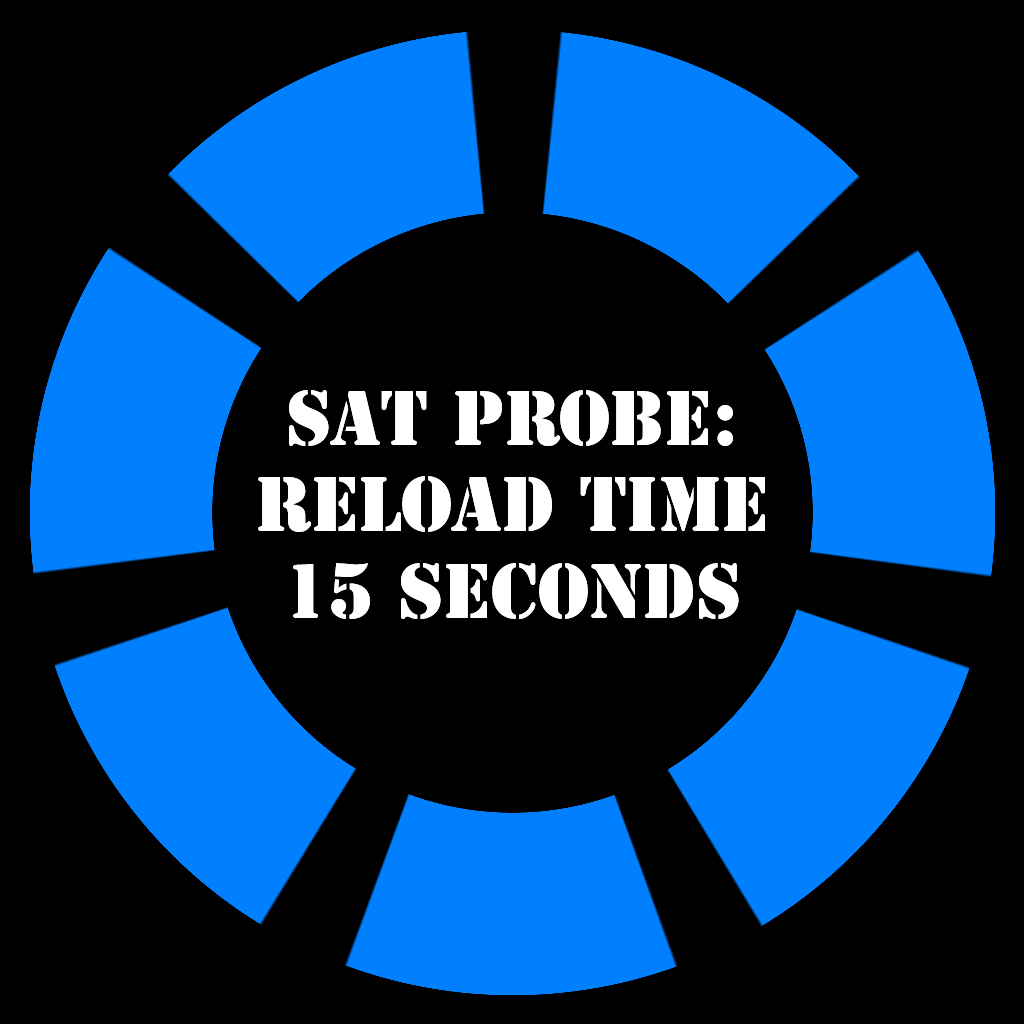
<style>
.page{position:relative;width:1024px;height:1024px;background:#000000}
.page>*{position:absolute;margin:0}
.t1{font:72px "StencilStd";color:#ffffff}
</style>
<div class="page">
<p class="t1" style="left:258px;top:390px;width:507px;height:229px;text-align:center">Sat Probe:<br>Reload time<br>15 Seconds</p>
</div>
